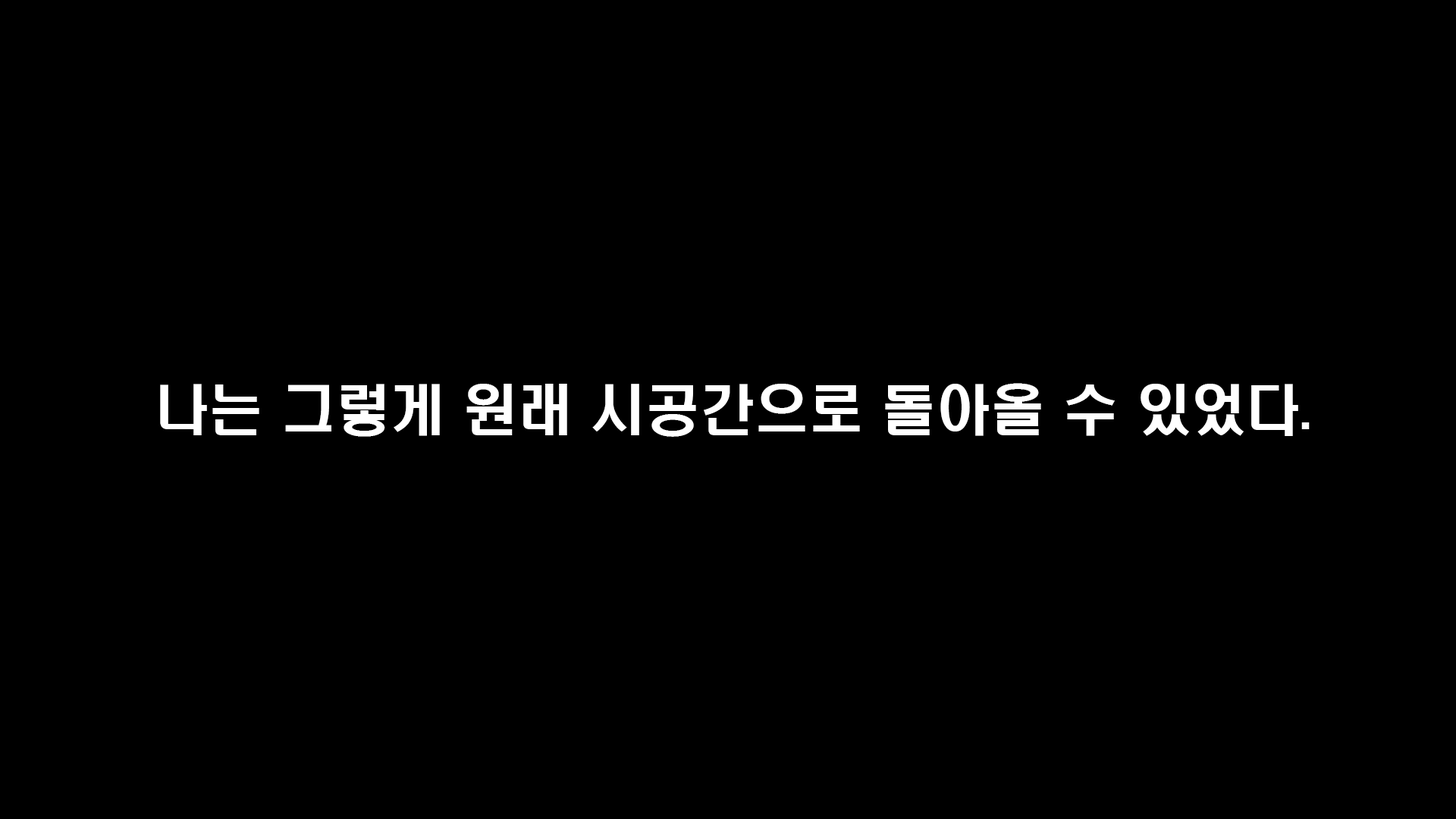
<style>
.page{position:relative;width:1456px;height:819px;background:#000000}
.page>*{position:absolute;margin:0}
.t1{font:54.6px "H2hdrM";color:#ffffff}
</style>
<div class="page">
<p class="t1" style="left:160px;top:383px;width:1150px;height:54px">나는 그렇게 원래 시공간으로 돌아올 수 있었다.</p>
</div>
